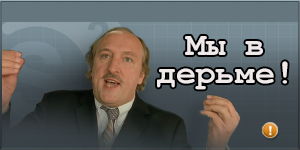
<style>
.page{position:relative;width:300px;height:150px}
.page>*{position:absolute;margin:0}
.t1{font:33px "CourierNewPS-BoldMT";color:#f0e9e9}
</style>
<div class="page">
<p class="t1" style="left:157px;top:36px;width:131px;height:54px">Мы в дерьме!</p>
</div>
